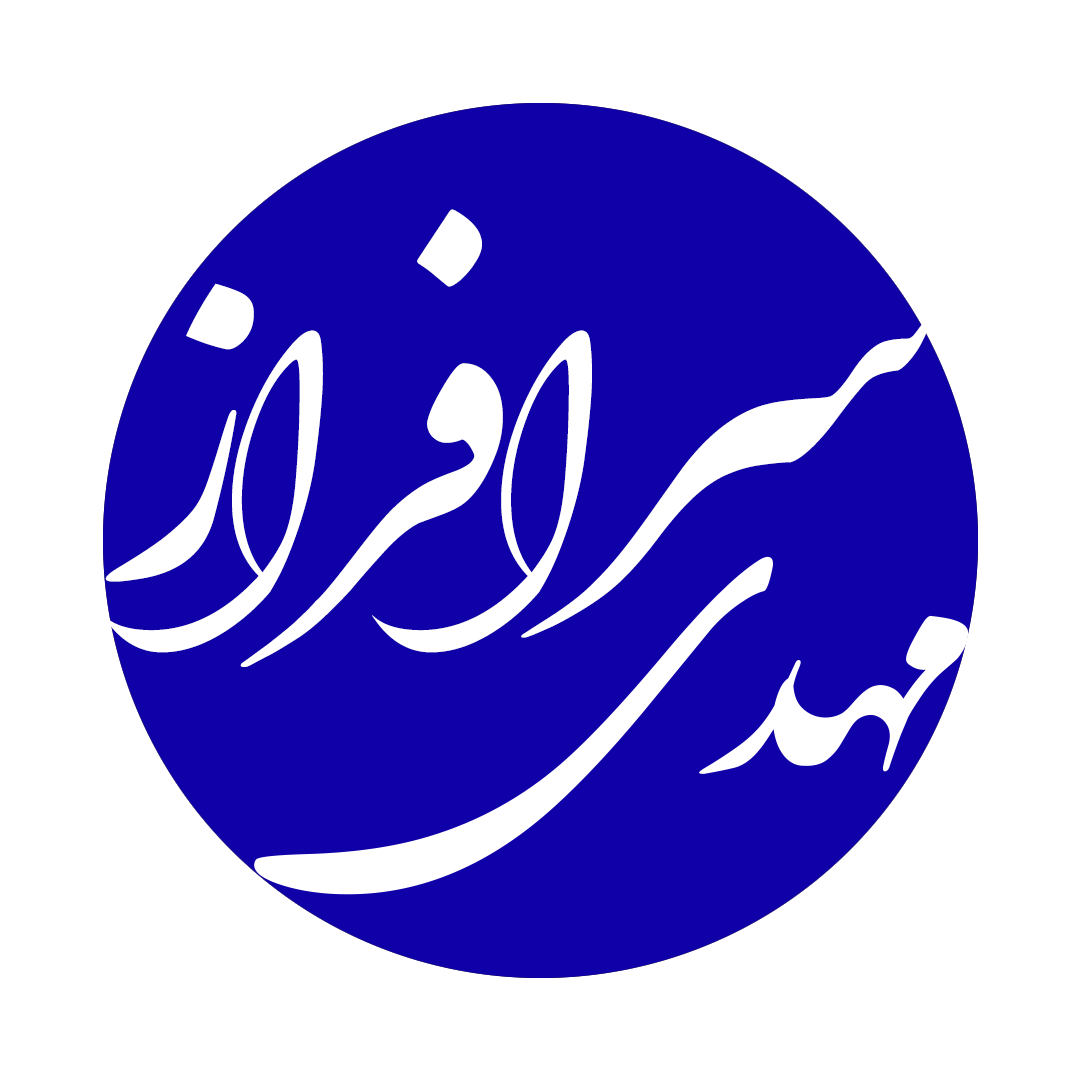
<style>
.page{position:relative;width:1080px;height:1080px;background:#ffffff}
.page>*{position:absolute;margin:0}
.t1{font:397.4px "DimaShekastehFree";color:#ffffff}
</style>
<div class="page">
<p class="t1" style="left:102px;top:209px;width:827px;height:458px">سرافراز</p>
</div>
